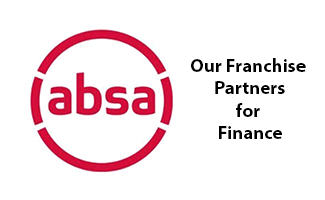
<style>
.page{position:relative;width:325px;height:200px;background:#ffffff}
.page>*{position:absolute;margin:0}
.t1{font:18.8px "MyriadPro-Bold";color:#000000}
</style>
<div class="page">
<p class="t1" style="left:191px;top:58px;width:115px;height:81px;text-align:center">Our Franchise <br>Partners<br>for <br>Finance</p>
</div>
